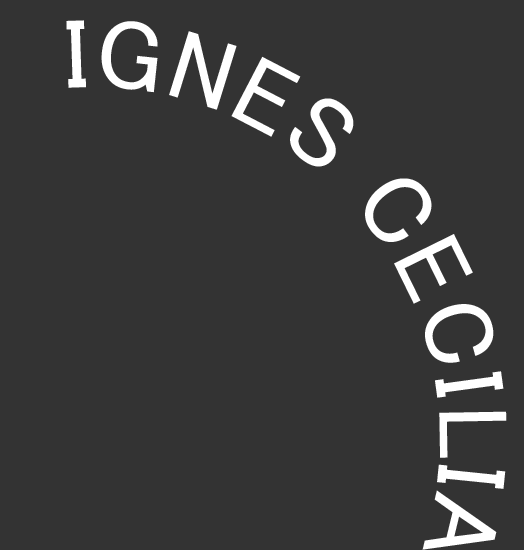
<style>
.page{position:relative;width:524px;height:550px;background:#333333}
.page>*{position:absolute;margin:0}
.t1{font:100px "MS-UIGothic";color:#ffffff}
</style>
<div class="page">
<p class="t1" style="left:66px;top:20px;width:20px;height:68px">I</p>
<p class="t1" style="left:101px;top:21px;width:57px;height:72px">G</p>
<p class="t1" style="left:169px;top:31px;width:68px;height:79px">N</p>
<p class="t1" style="left:231px;top:56px;width:70px;height:81px">E</p>
<p class="t1" style="left:290px;top:98px;width:64px;height:69px">S</p>
<p class="t1" style="left:365px;top:178px;width:67px;height:64px">C</p>
<p class="t1" style="left:394px;top:234px;width:79px;height:70px">E</p>
<p class="t1" style="left:425px;top:304px;width:69px;height:59px">C</p>
<p class="t1" style="left:435px;top:371px;width:69px;height:27px">I</p>
<p class="t1" style="left:439px;top:411px;width:68px;height:47px">L</p>
<p class="t1" style="left:437px;top:464px;width:69px;height:25px">I</p>
<p class="t1" style="left:422px;top:490px;width:75px;height:60px">A</p>
</div>
